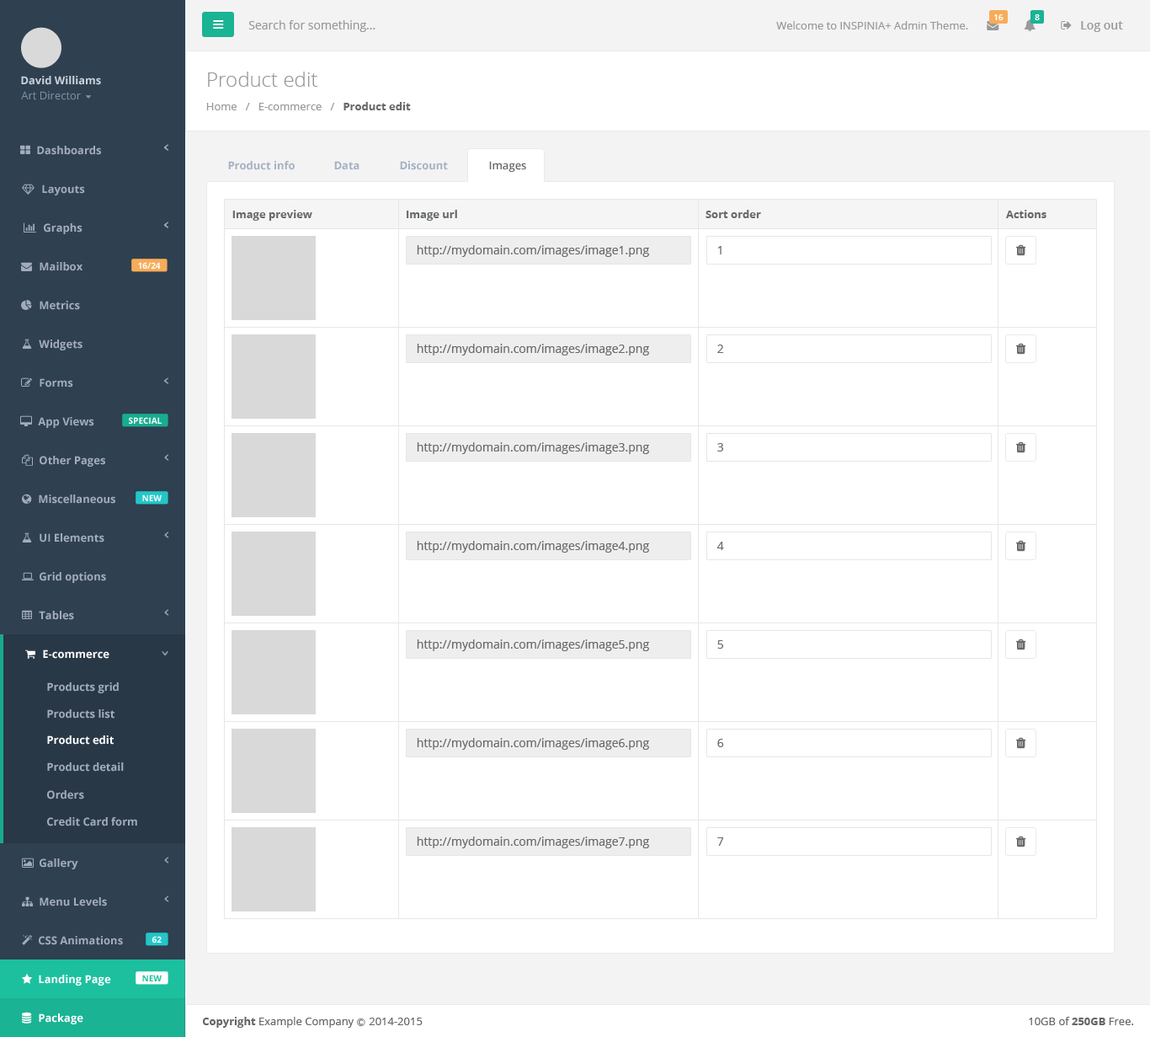
<style>
.page{position:relative;width:1150px;height:1037px;background:#ffffff}
.page>*{position:absolute;margin:0}
.t1{font:8.4px "OpenSans-Semibold";color:#ffffff}
.t2{font:11.8px "OpenSans";color:#999999}
.t3{font:10.9px "OpenSans";color:#999999}
.t4{font:11.8px "OpenSans-Semibold";color:#999999}
.t5{font:10.9px "OpenSans-Bold";color:#cad1db}
.t6{font:20.2px "OpenSans-Light";color:#999999}
.t7{font:10.9px "OpenSans";color:#7d93a5}
.t8{font:10.9px "OpenSans-Bold";color:#676a6c}
.t9{font:10.9px "OpenSans-Bold";color:#a2acbd}
.t10{font:10.9px "OpenSans-Bold";color:#a7b1c2}
.t11{font:10.9px "OpenSans-Semibold";color:#676a6c}
.t12{font:11.8px "OpenSans";color:#686b6d}
.t13{font:8.4px "OpenSans-Bold";color:#fefefe}
.t14{font:10.9px "OpenSans-Bold";color:#ffffff}
.t15{font:8.4px "OpenSans-Bold";color:#1cc09f}
.t16{font:10.9px "OpenSans";color:#666666}
.t17{font:10.9px "OpenSans-Bold";color:#666666}
.t18{font:8.4px "Meiryo";color:#666666}
</style>
<div class="page">
<p class="t1" style="left:995px;top:14px;width:9px;height:6px">16</p>
<p class="t1" style="left:1035px;top:14px;width:5px;height:6px">8</p>
<p class="t2" style="left:248px;top:20px;width:128px;height:12px">Search for something...</p>
<p class="t3" style="left:776px;top:21px;width:192px;height:8px">Welcome to INSPINIA+ Admin Theme.</p>
<p class="t4" style="left:1081px;top:21px;width:42px;height:11px">Log out</p>
<p class="t5" style="left:21px;top:76px;width:80px;height:9px">David Williams</p>
<p class="t6" style="left:208px;top:72px;width:109px;height:15px">Product edit</p>
<p class="t7" style="left:21px;top:91px;width:60px;height:9px">Art Director</p>
<p class="t3" style="left:206px;top:102px;width:205px;height:8px">Home   /   E-commerce   /   <span class="t8">Product edit</span></p>
<p class="t9" style="left:37px;top:146px;width:64px;height:9px">Dashboards</p>
<p class="t10" style="left:228px;top:161px;width:67px;height:9px">Product info</p>
<p class="t10" style="left:334px;top:161px;width:26px;height:9px">Data</p>
<p class="t10" style="left:400px;top:161px;width:48px;height:9px">Discount</p>
<p class="t11" style="left:489px;top:161px;width:37px;height:11px">Images</p>
<p class="t9" style="left:42px;top:184px;width:43px;height:11px">Layouts</p>
<p class="t8" style="left:232px;top:210px;width:80px;height:11px">Image preview</p>
<p class="t8" style="left:407px;top:210px;width:50px;height:11px">Image url</p>
<p class="t8" style="left:706px;top:210px;width:55px;height:8px">Sort order</p>
<p class="t8" style="left:1006px;top:210px;width:41px;height:8px">Actions</p>
<p class="t9" style="left:44px;top:223px;width:39px;height:11px">Graphs</p>
<p class="t12" style="left:417px;top:245px;width:232px;height:12px">http://mydomain.com/images/image1.png</p>
<p class="t12" style="left:718px;top:246px;width:4px;height:8px">1</p>
<p class="t9" style="left:40px;top:262px;width:43px;height:9px">Mailbox</p>
<p class="t13" style="left:138px;top:262px;width:23px;height:7px">16/24</p>
<p class="t9" style="left:40px;top:301px;width:40px;height:9px">Metrics</p>
<p class="t9" style="left:39px;top:339px;width:44px;height:11px">Widgets</p>
<p class="t12" style="left:417px;top:344px;width:232px;height:11px">http://mydomain.com/images/image2.png</p>
<p class="t12" style="left:717px;top:344px;width:7px;height:9px">2</p>
<p class="t9" style="left:40px;top:378px;width:33px;height:9px">Forms</p>
<p class="t9" style="left:38px;top:417px;width:56px;height:11px">App Views</p>
<p class="t13" style="left:129px;top:417px;width:33px;height:7px">SPECIAL</p>
<p class="t12" style="left:417px;top:442px;width:232px;height:12px">http://mydomain.com/images/image3.png</p>
<p class="t12" style="left:717px;top:443px;width:6px;height:8px">3</p>
<p class="t9" style="left:40px;top:456px;width:65px;height:11px">Other Pages</p>
<p class="t9" style="left:39px;top:494px;width:76px;height:10px">Miscellaneous</p>
<p class="t13" style="left:142px;top:494px;width:20px;height:7px">NEW</p>
<p class="t9" style="left:40px;top:533px;width:64px;height:9px">UI Elements</p>
<p class="t12" style="left:417px;top:541px;width:232px;height:11px">http://mydomain.com/images/image4.png</p>
<p class="t12" style="left:717px;top:541px;width:7px;height:9px">4</p>
<p class="t9" style="left:40px;top:572px;width:66px;height:11px">Grid options</p>
<p class="t9" style="left:39px;top:611px;width:35px;height:9px">Tables</p>
<p class="t12" style="left:417px;top:639px;width:232px;height:12px">http://mydomain.com/images/image5.png</p>
<p class="t12" style="left:717px;top:640px;width:7px;height:8px">5</p>
<p class="t14" style="left:43px;top:649px;width:66px;height:10px">E-commerce</p>
<p class="t9" style="left:47px;top:682px;width:72px;height:11px">Products grid</p>
<p class="t9" style="left:47px;top:709px;width:68px;height:9px">Products list</p>
<p class="t14" style="left:47px;top:735px;width:67px;height:9px">Product edit</p>
<p class="t12" style="left:417px;top:738px;width:232px;height:11px">http://mydomain.com/images/image6.png</p>
<p class="t12" style="left:717px;top:739px;width:7px;height:8px">6</p>
<p class="t9" style="left:47px;top:762px;width:77px;height:9px">Product detail</p>
<p class="t9" style="left:47px;top:790px;width:37px;height:9px">Orders</p>
<p class="t9" style="left:47px;top:817px;width:90px;height:9px">Credit Card form</p>
<p class="t12" style="left:417px;top:836px;width:232px;height:12px">http://mydomain.com/images/image7.png</p>
<p class="t12" style="left:717px;top:837px;width:7px;height:8px">7</p>
<p class="t9" style="left:40px;top:858px;width:38px;height:11px">Gallery</p>
<p class="t9" style="left:40px;top:897px;width:67px;height:9px">Menu Levels</p>
<p class="t9" style="left:39px;top:936px;width:84px;height:9px">CSS Animations</p>
<p class="t13" style="left:152px;top:936px;width:10px;height:6px">62</p>
<p class="t14" style="left:39px;top:974px;width:72px;height:11px">Landing Page</p>
<p class="t15" style="left:142px;top:974px;width:20px;height:7px">NEW</p>
<p class="t14" style="left:39px;top:1013px;width:44px;height:11px">Package</p>
<p class="t16" style="left:202px;top:1016px;width:221px;height:11px"><span class="t17">Copyright</span> Example Company <span class="t18">Ⓒ </span>2014-2015</p>
<p class="t16" style="left:1029px;top:1016px;width:105px;height:9px">10GB of <span class="t17">250GB</span> Free.</p>
</div>
